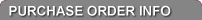
<style>
.page{position:relative;width:202px;height:20px;background:#858585}
.page>*{position:absolute;margin:0}
.t1{font:13.3px "Arial-BoldMT";color:#ffffff}
</style>
<div class="page">
<p class="t1" style="left:9px;top:5px;width:162px;height:11px">PURCHASE ORDER INFO</p>
</div>
